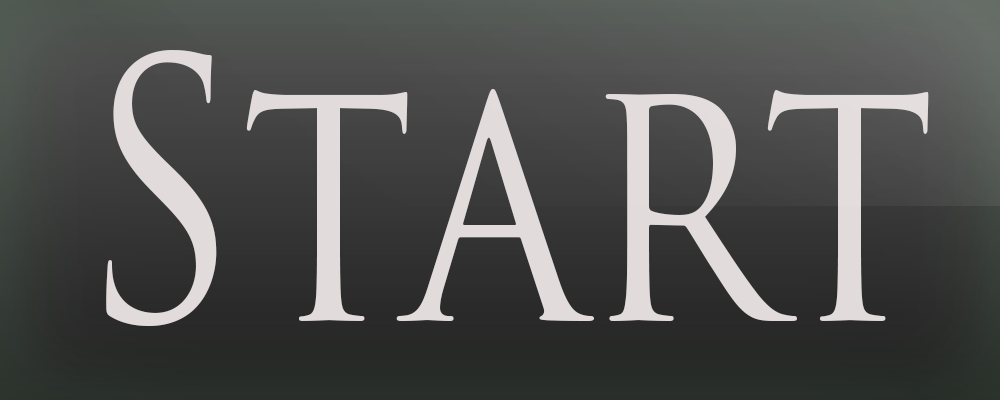
<style>
.page{position:relative;width:1000px;height:400px}
.page>*{position:absolute;margin:0}
.t1{font:352.2px "TrajanPro-Regular";color:#e2dbdb;scale:0.81 1}
</style>
<div class="page">
<p class="t1" style="left:106px;top:50px;width:823px;height:276px">Start</p>
</div>
